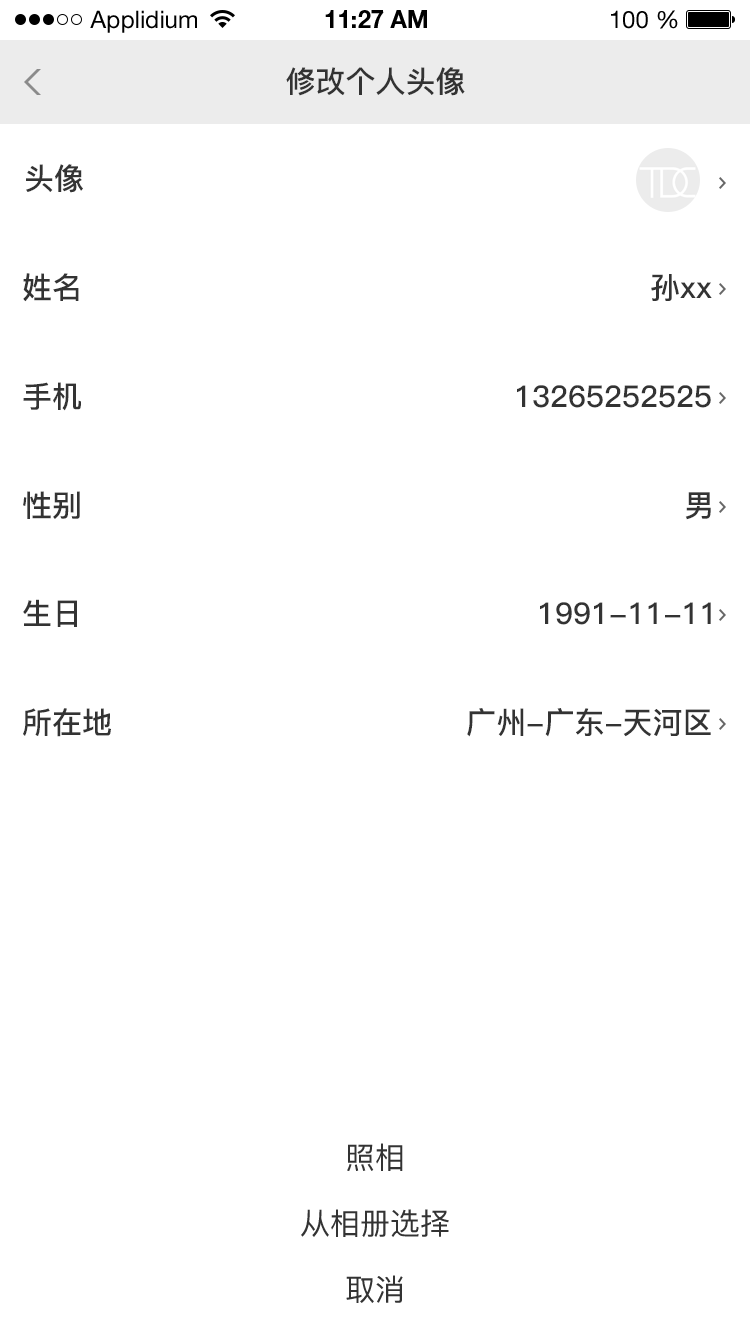
<style>
.page{position:relative;width:750px;height:1334px;background:#ffffff}
.page>*{position:absolute;margin:0}
.t1{font:24px "HelveticaNeueLTStd-Roman";color:#000000}
.t2{font:24px "HelveticaNeueLTStd-Bd";color:#000000}
.t3{font:30px "PingFang-SC-Bold";color:#333333}
.t4{font:30px "PingFang-SC-Medium";color:#333333}
</style>
<div class="page">
<p class="t1" style="left:90px;top:10px;width:107px;height:23px">Applidium</p>
<p class="t2" style="left:325px;top:10px;width:102px;height:18px">11:27 AM</p>
<p class="t1" style="left:611px;top:10px;width:67px;height:19px">100 %</p>
<p class="t3" style="left:286px;top:67px;width:179px;height:29px">修改个人头像</p>
<p class="t3" style="left:26px;top:164px;width:57px;height:29px">头像</p>
<p class="t3" style="left:23px;top:273px;width:56px;height:29px">姓名</p>
<p class="t3" style="left:651px;top:274px;width:61px;height:27px">孙xx</p>
<p class="t3" style="left:23px;top:382px;width:58px;height:29px">手机</p>
<p class="t3" style="left:517px;top:385px;width:194px;height:23px">13265252525</p>
<p class="t3" style="left:23px;top:491px;width:57px;height:28px">性别</p>
<p class="t3" style="left:685px;top:492px;width:26px;height:28px">男</p>
<p class="t3" style="left:23px;top:599px;width:54px;height:28px">生日</p>
<p class="t3" style="left:540px;top:602px;width:171px;height:23px">1991-11-11</p>
<p class="t3" style="left:23px;top:708px;width:88px;height:29px">所在地</p>
<p class="t3" style="left:467px;top:708px;width:244px;height:29px">广州-广东-天河区</p>
<p class="t4" style="left:347px;top:1143px;width:56px;height:28px">照相</p>
<p class="t4" style="left:301px;top:1209px;width:148px;height:28px">从相册选择</p>
<p class="t4" style="left:346px;top:1275px;width:57px;height:28px">取消</p>
</div>
